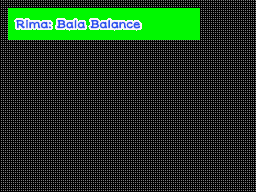
<style>
.page{position:relative;width:256px;height:192px;background:#000000}
.page>*{position:absolute;margin:0}
.t1{font:15px "DFLeiShoStd-W5";letter-spacing:-0.025em;color:#2850f0;font-weight:bold}
</style>
<div class="page">
<p class="t1" style="left:16px;top:19px;width:125px;height:10px">Rima: Bala Balance</p>
</div>
